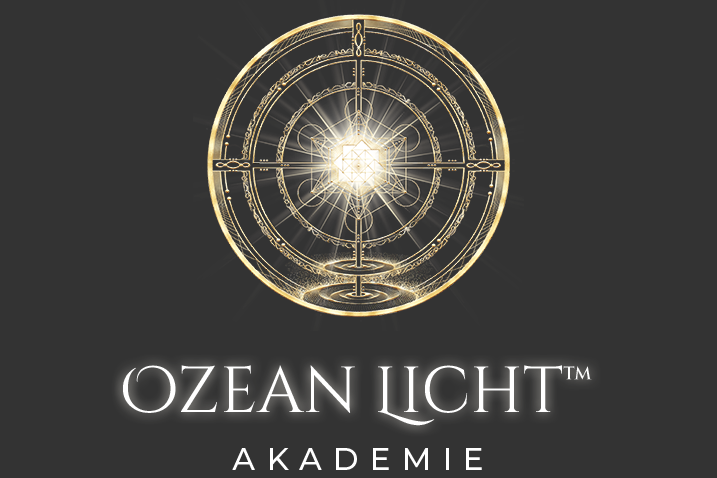
<style>
.page{position:relative;width:717px;height:478px;background:#333333}
.page>*{position:absolute;margin:0}
.t1{font:64.9px "CinzelDecorative-Regular";color:#ffffff}
.t2{font:31px "Montserrat-Medium";letter-spacing:0.36em;color:#ffffff;text-transform:uppercase}
</style>
<div class="page">
<p class="t1" style="left:123px;top:365px;width:469px;height:61px">Ozean Licht™</p>
<p class="t2" style="left:232px;top:448px;width:250px;height:22px">Akademie</p>
</div>
